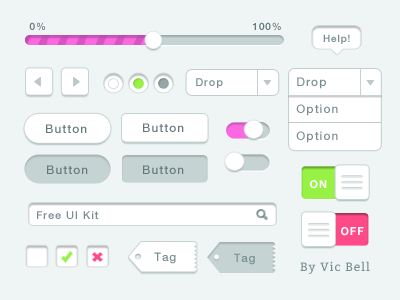
<style>
.page{position:relative;width:400px;height:300px;background:#eff4f4}
.page>*{position:absolute;margin:0}
.t1{font:10.1px "HelveticaNeue-Medium";letter-spacing:0.075em;color:#64797c}
.t2{font:10.1px "HelveticaNeue-Medium";letter-spacing:0.075em;color:#798e8f}
.t3{font:11.1px "HelveticaNeue-Medium";letter-spacing:0.075em;color:#798e8f}
.t4{font:12.1px "HelveticaNeue-Medium";letter-spacing:0.075em;color:#798e8f}
.t5{font:12.1px "HelveticaNeue-Medium";letter-spacing:0.075em;color:#64787c}
.t6{font:11px "HelveticaNeue-Bold";letter-spacing:0.075em;color:#ffffff}
.t7{font:11.7px "HelveticaNeue-Medium";letter-spacing:0.075em;color:#798e8f}
.t8{font:11.5px "HelveticaNeue-Medium";letter-spacing:0.075em;color:#798e8f}
.t9{font:12.1px "Bitter-Regular";letter-spacing:0.075em;color:#798e8f}
</style>
<div class="page">
<p class="t1" style="left:29px;top:22px;width:16px;height:9px">0%</p>
<p class="t1" style="left:253px;top:22px;width:28px;height:9px">100%</p>
<p class="t2" style="left:323px;top:34px;width:27px;height:10px">Help!</p>
<p class="t3" style="left:196px;top:78px;width:27px;height:10px">Drop</p>
<p class="t4" style="left:297px;top:77px;width:29px;height:12px">Drop</p>
<p class="t4" style="left:296px;top:104px;width:42px;height:12px">Option</p>
<p class="t5" style="left:46px;top:124px;width:41px;height:9px">Button</p>
<p class="t5" style="left:143px;top:123px;width:41px;height:9px">Button</p>
<p class="t4" style="left:296px;top:131px;width:42px;height:12px">Option</p>
<p class="t5" style="left:47px;top:165px;width:41px;height:9px">Button</p>
<p class="t5" style="left:143px;top:165px;width:41px;height:9px">Button</p>
<p class="t6" style="left:310px;top:180px;width:17px;height:9px">ON</p>
<p class="t3" style="left:37px;top:211px;width:62px;height:8px">Free UI Kit</p>
<p class="t6" style="left:341px;top:227px;width:23px;height:9px">OFF</p>
<p class="t7" style="left:154px;top:252px;width:22px;height:12px">Tag</p>
<p class="t8" style="left:234px;top:253px;width:21px;height:12px">Tag</p>
<p class="t9" style="left:300px;top:261px;width:70px;height:13px">By Vic Bell</p>
</div>
